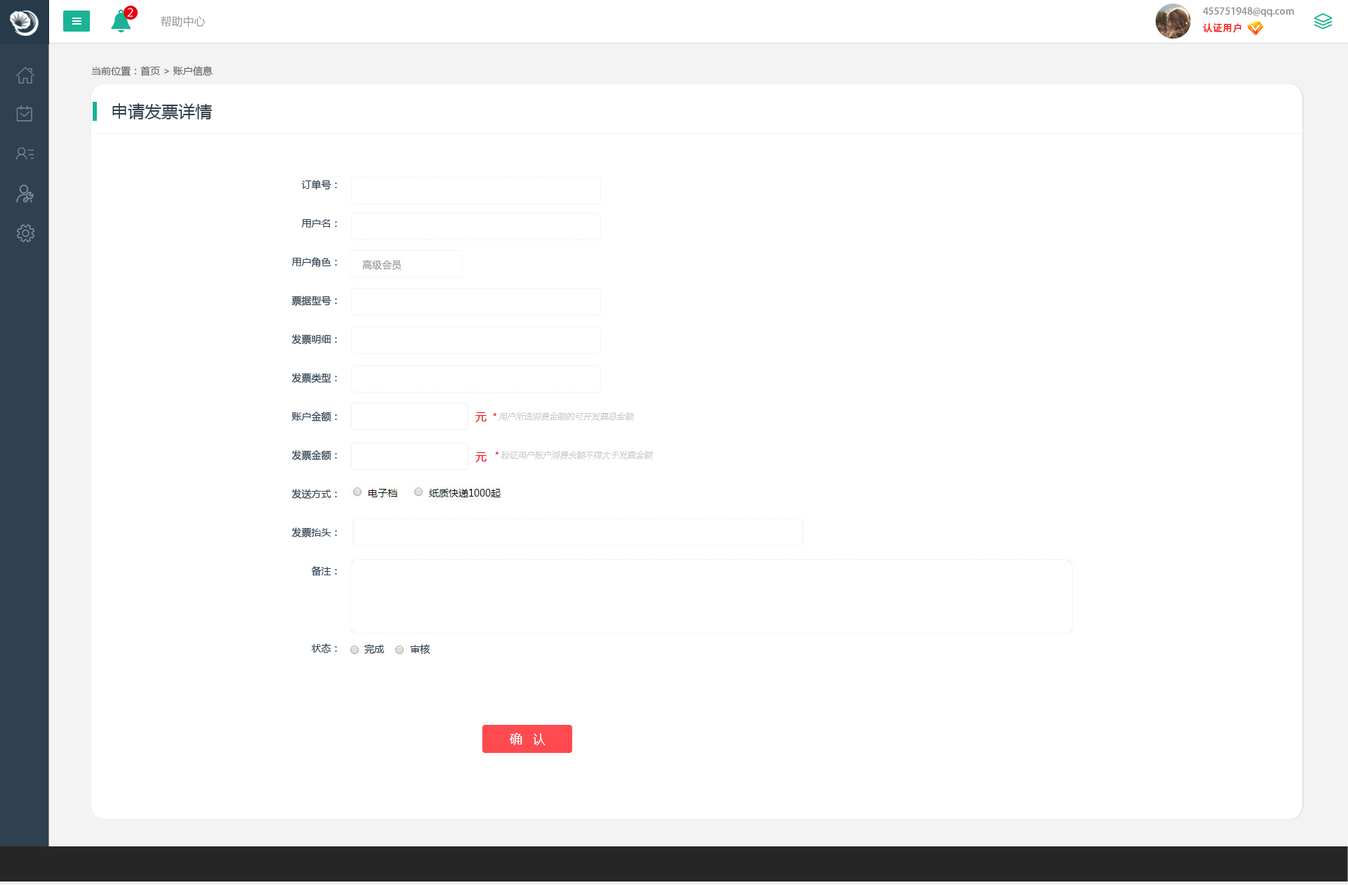
<style>
.page{position:relative;width:1348px;height:885px;background:#ffffff}
.page>*{position:absolute;margin:0}
.t1{font:11.2px "MicrosoftYaHei";color:#ffffff}
.t2{font:11.2px "MicrosoftYaHei";color:#999999}
.t3{font:9.8px/16.8px "AdobeHeitiStd-Regular";color:#999999}
.t4{font:9.8px/16.8px "AdobeHeitiStd-Regular";color:#f61e1e}
.t5{font:9.8px/16.8px "AdobeHeitiStd-Regular";color:#ffffff}
.t6{font:9.8px "MicrosoftYaHei";color:#666666}
.t7{font:16.8px "MicrosoftYaHei";color:#2f4050}
.t8{font:9.8px/38.6px "MicrosoftYaHei";color:#2f4050}
.t9{font:9.8px "MicrosoftYaHei";color:#999999}
.t10{font:8.4px "MicrosoftYaHei";color:#cccccc;font-style:italic}
.t11{font:8.4px "MicrosoftYaHei";color:#e60012;font-style:italic}
.t12{font:9.8px "MicrosoftYaHei";color:#2f4050}
</style>
<div class="page">
<p class="t1" style="left:127px;top:8px;width:6px;height:9px">2</p>
<p class="t2" style="left:161px;top:15px;width:45px;height:12px">帮助中心</p>
<p class="t3" style="left:1203px;top:7px;width:91px;height:26px">455751948@qq.com<br><span class="t4">认证用户               </span><span class="t5">退出</span></p>
<p class="t6" style="left:91px;top:66px;width:122px;height:10px">当前位置：首页 &gt; 账户信息</p>
<p class="t7" style="left:112px;top:103px;width:100px;height:16px">申请发票详情</p>
<p class="t8" style="left:291px;top:180px;width:46px;height:473px;text-align:right">订单号：<br>用户名：<br>用户角色：<br>票据型号：<br>发票明细：<br>发票类型：<br>账户金额：<br>发票金额：<br>发送方式：<br>发票抬头：<br>备注：<br><br>状态：</p>
<p class="t9" style="left:362px;top:260px;width:40px;height:10px">高级会员</p>
<p class="t10" style="left:494px;top:412px;width:140px;height:9px"><span class="t11">* </span>用户所选消费金额的可开发票总金额</p>
<p class="t10" style="left:496px;top:451px;width:157px;height:8px"><span class="t11">* </span>验证用户账户消费余额不得大于发票金额</p>
<p class="t12" style="left:364px;top:644px;width:66px;height:10px">完成         审核</p>
</div>
